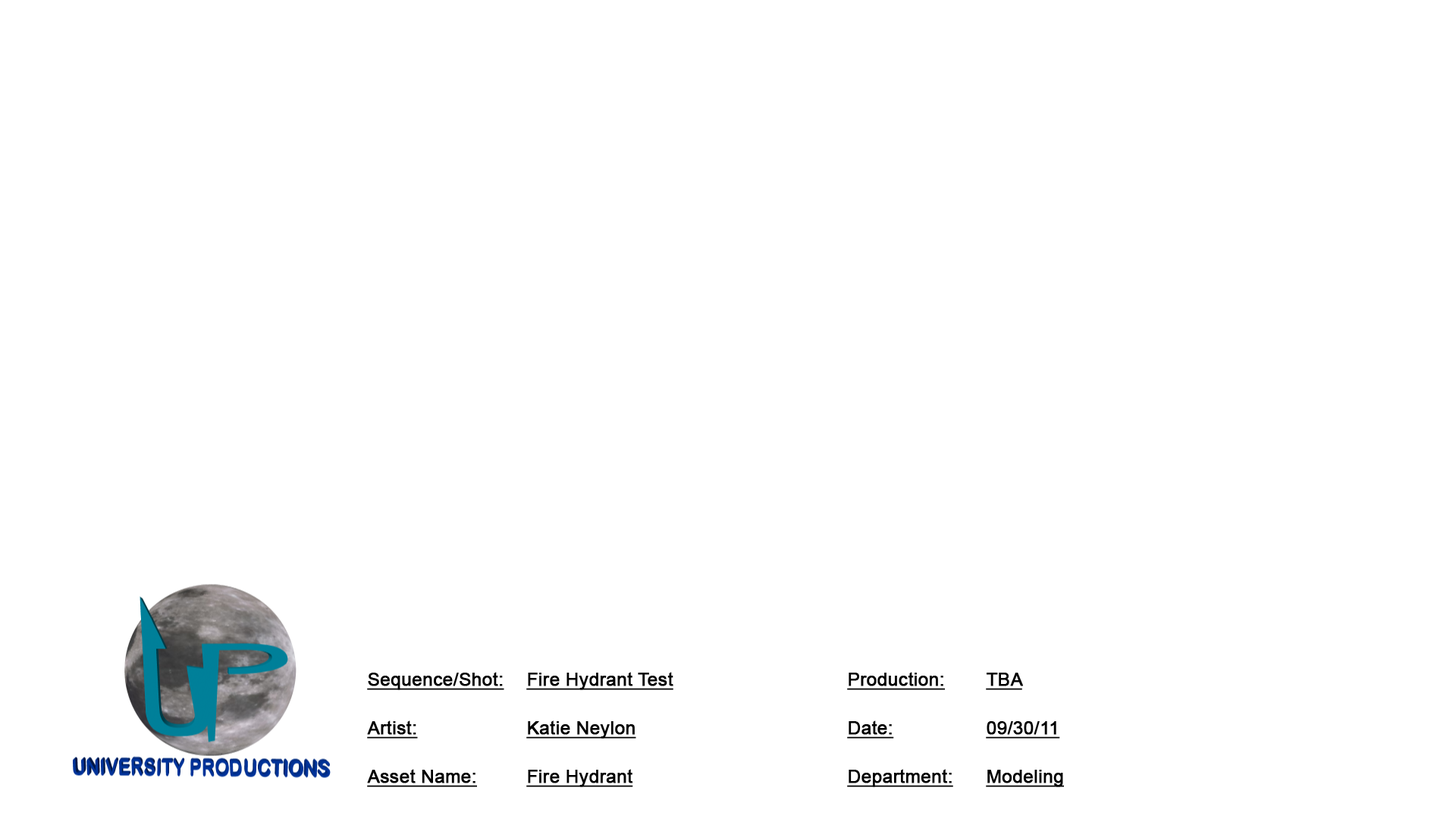
<style>
.page{position:relative;width:1456px;height:819px;background:#ffffff}
.page>*{position:absolute;margin:0}
.t1{font:18.2px "ArialMT";color:#000000;font-weight:bold;text-decoration:underline}
</style>
<div class="page">
<p class="t1" style="left:367px;top:672px;width:137px;height:18px">Sequence/Shot:</p>
<p class="t1" style="left:526px;top:672px;width:147px;height:18px">Fire Hydrant Test</p>
<p class="t1" style="left:847px;top:672px;width:98px;height:18px">Production:</p>
<p class="t1" style="left:986px;top:673px;width:37px;height:17px">TBA</p>
<p class="t1" style="left:367px;top:720px;width:51px;height:19px">Artist:</p>
<p class="t1" style="left:526px;top:720px;width:110px;height:19px">Katie Neylon</p>
<p class="t1" style="left:847px;top:720px;width:47px;height:19px">Date:</p>
<p class="t1" style="left:986px;top:721px;width:74px;height:18px">09/30/11</p>
<p class="t1" style="left:367px;top:769px;width:110px;height:18px">Asset Name:</p>
<p class="t1" style="left:526px;top:769px;width:107px;height:18px">Fire Hydrant</p>
<p class="t1" style="left:847px;top:769px;width:106px;height:18px">Department:</p>
</div>
